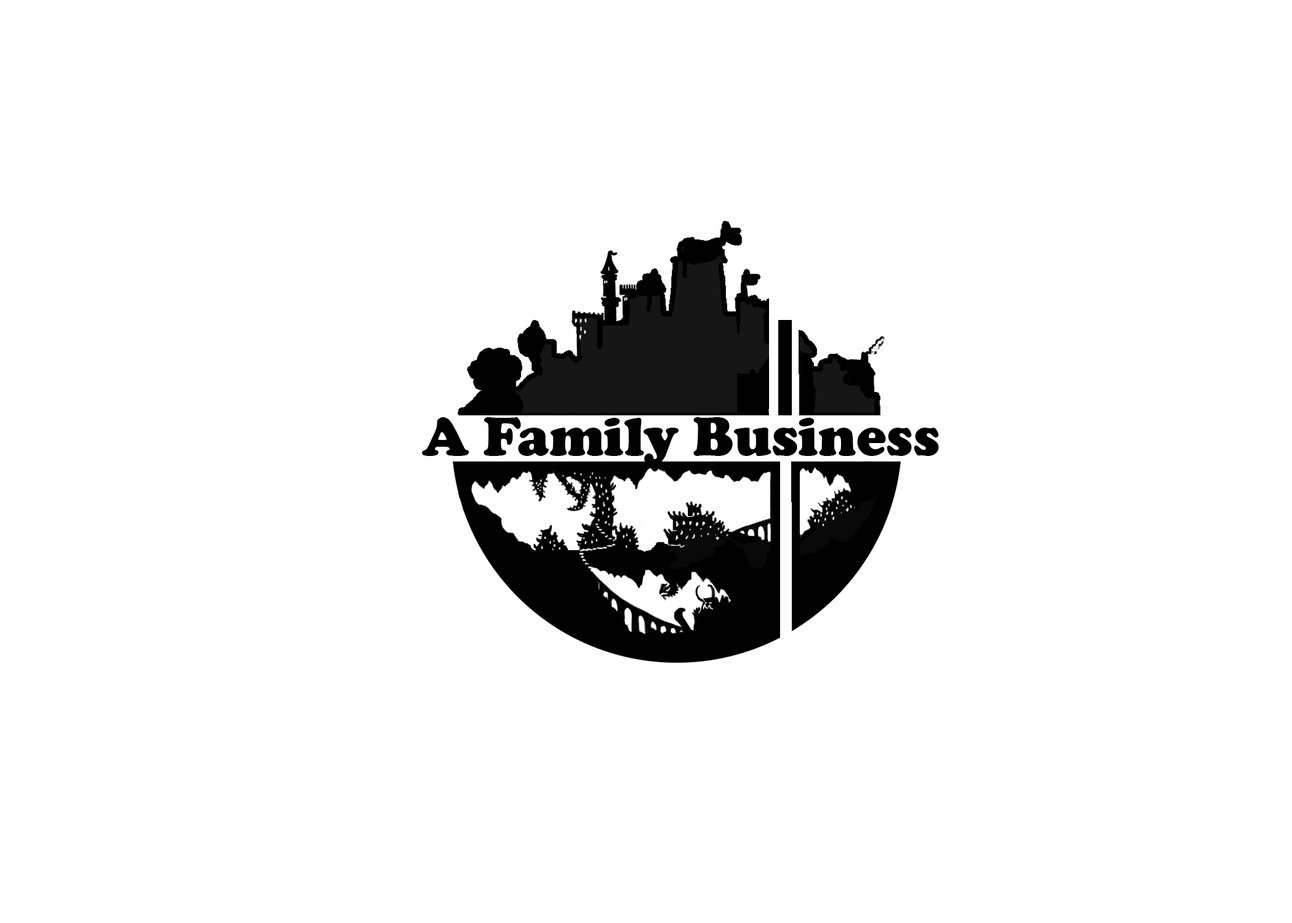
<style>
.page{position:relative;width:1292px;height:923px;background:#ffffff}
.page>*{position:absolute;margin:0}
.t1{font:56.4px "CooperBlack";color:#000000}
</style>
<div class="page">
<p class="t1" style="left:422px;top:417px;width:517px;height:48px">A Family Business</p>
</div>
